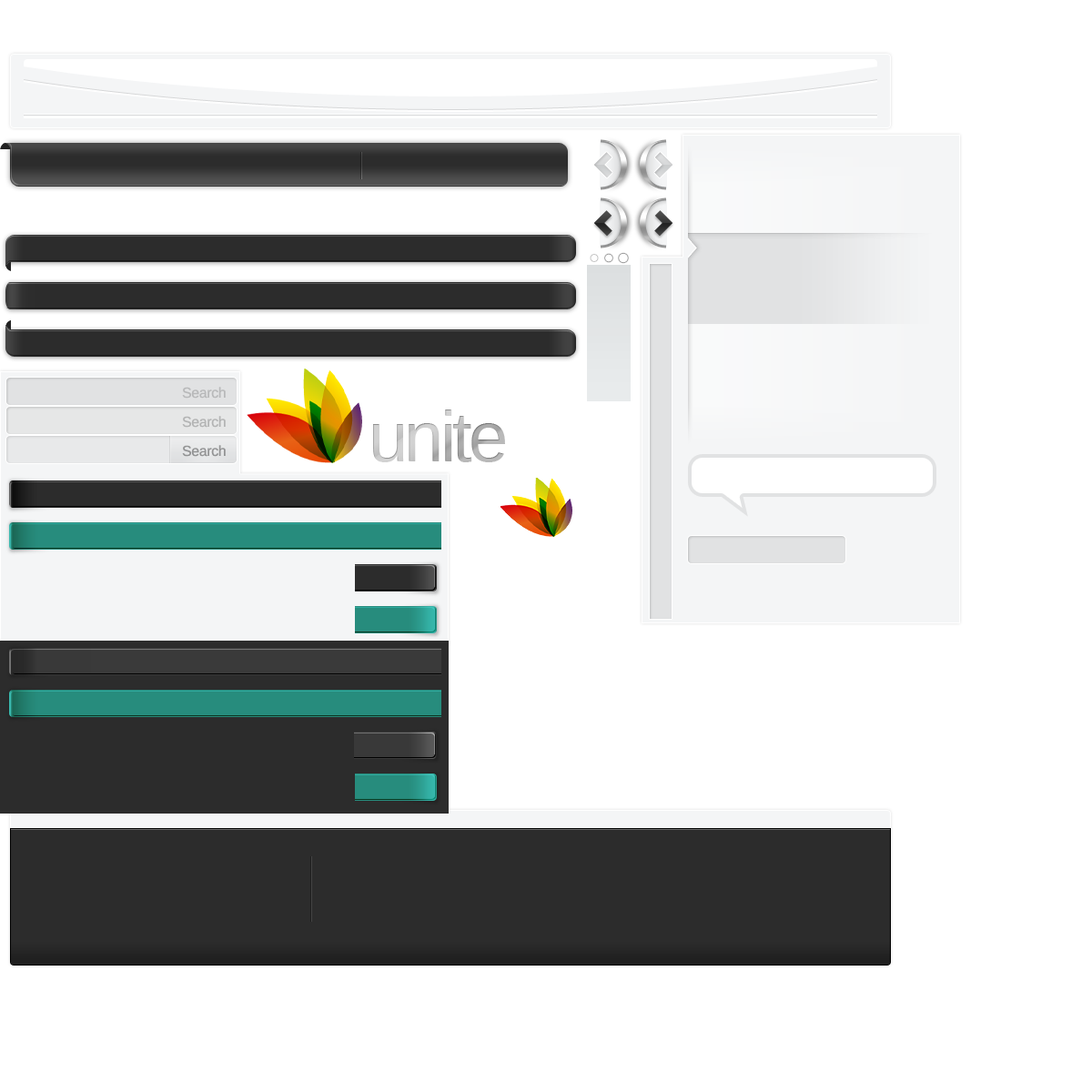
<style>
.page{position:relative;width:1092px;height:1092px;background:#ffffff}
.page>*{position:absolute;margin:0}
.t1{font:14.6px "LiberationSans-Regular";letter-spacing:-0.025em;color:#b8b9ba}
.t2{font:71px "LiberationSans-Regular";letter-spacing:-0.05em}
.t3{font:14.6px "LiberationSans-Regular";letter-spacing:-0.025em;color:#b3b4b4}
.t4{font:14.6px "LiberationSans-Regular";letter-spacing:-0.025em;color:#939495}
</style>
<div class="page">
<p class="t1" style="left:182px;top:387px;width:44px;height:12px">Search</p>
<p class="t2" style="left:373px;top:409px;width:132px;height:53px">unite</p>
<p class="t3" style="left:182px;top:416px;width:44px;height:12px">Search</p>
<p class="t4" style="left:182px;top:445px;width:44px;height:12px">Search</p>
</div>
